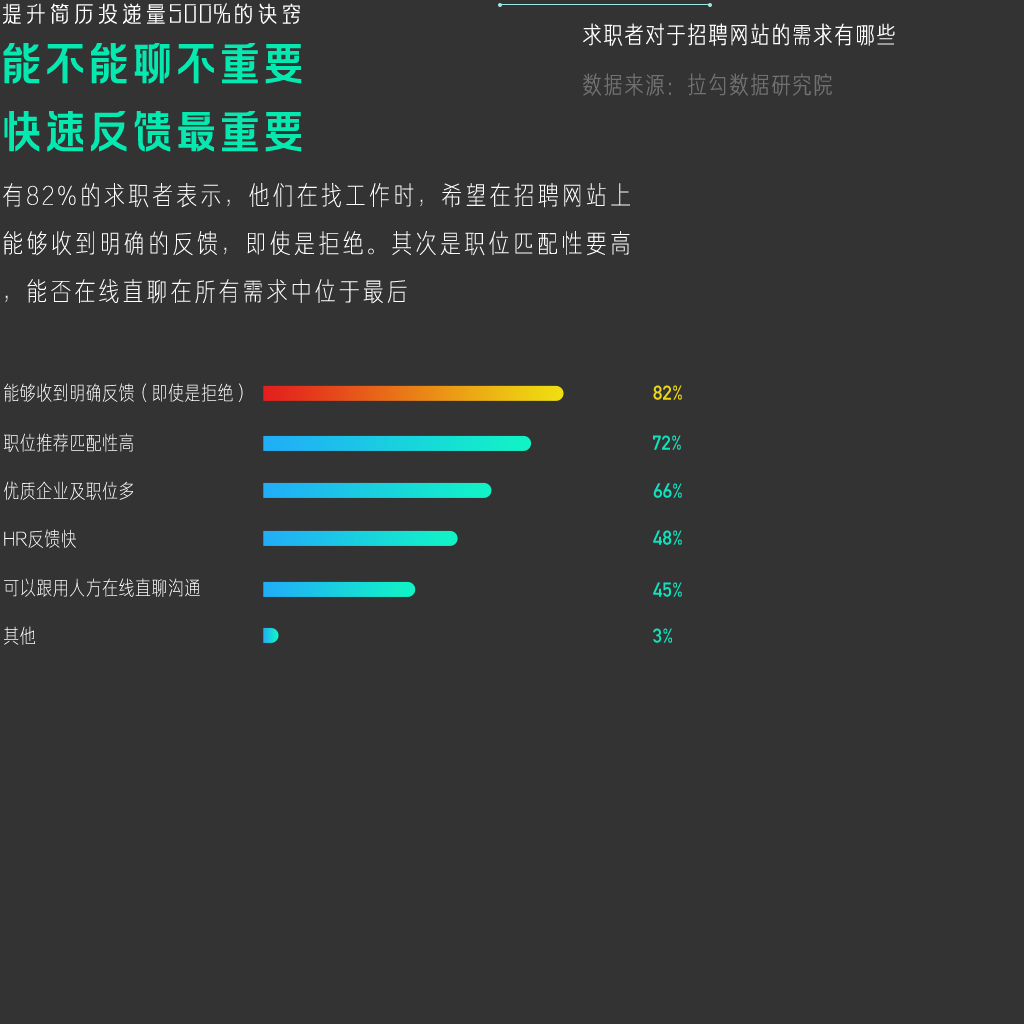
<style>
.page{position:relative;width:1024px;height:1024px;background:#333333}
.page>*{position:absolute;margin:0}
.t1{font:24px "FZLAGBTTS_XI--GB1-0";color:#ffffff;text-transform:uppercase}
.t2{font:24px "FZJUNH_XIJW--GB1-0";letter-spacing:0.05em;color:#ffffff;text-transform:uppercase}
.t3{font:48px/34px "FZLAGBTTS_ZHONG--GB1-0";letter-spacing:-0.09em;color:#05e9b1;text-transform:uppercase}
.t4{font:24px "FZJUNH_XIJW--GB1-0";letter-spacing:0.05em;color:#717171;text-transform:uppercase}
.t5{font:26px/48px "FZJUNH_XIANJW--GB1-0";letter-spacing:0.1em;color:#ffffff}
.t6{font:20px "FZJUNH_XIJW--GB1-0";color:#ffffff}
.t7{font:20px "DINAlternate-Bold";color:#efd811}
.t8{font:20px "DINAlternate-Bold";color:#0ee3bd}
</style>
<div class="page">
<p class="t1" style="left:3px;top:3px;width:297px;height:21px">提升简历投递量500%的诀窍</p>
<p class="t2" style="left:583px;top:23px;width:312px;height:23px">求职者对于招聘网站的需求有哪些</p>
<p class="t3" style="left:3px;top:43px;width:299px;height:109px">能不能聊不重要<br><br>快速反馈最重要</p>
<p class="t4" style="left:583px;top:73px;width:249px;height:23px">数据来源：拉勾数据研究院</p>
<p class="t5" style="left:3px;top:183px;width:627px;height:121px;text-align:justify">有82%的求职者表示，他们在找工作时，希望在招聘网站上能够收到明确的反馈，即使是拒绝。其次是职位匹配性要高，能否在线直聊在所有需求中位于最后</p>
<p class="t6" style="left:4px;top:383px;width:239px;height:19px">能够收到明确反馈（即使是拒绝）</p>
<p class="t7" style="left:653px;top:385px;width:29px;height:15px">82%</p>
<p class="t6" style="left:3px;top:433px;width:131px;height:19px">职位推荐匹配性高</p>
<p class="t8" style="left:653px;top:435px;width:28px;height:15px">72%</p>
<p class="t6" style="left:4px;top:481px;width:129px;height:19px">优质企业及职位多</p>
<p class="t8" style="left:653px;top:483px;width:29px;height:15px">66%</p>
<p class="t6" style="left:4px;top:529px;width:72px;height:19px">HR反馈快</p>
<p class="t8" style="left:653px;top:530px;width:29px;height:15px">48%</p>
<p class="t6" style="left:4px;top:578px;width:196px;height:19px">可以跟用人方在线直聊沟通</p>
<p class="t8" style="left:653px;top:582px;width:29px;height:15px">45%</p>
<p class="t6" style="left:4px;top:626px;width:31px;height:19px">其他</p>
<p class="t8" style="left:653px;top:628px;width:19px;height:15px">3%</p>
</div>
